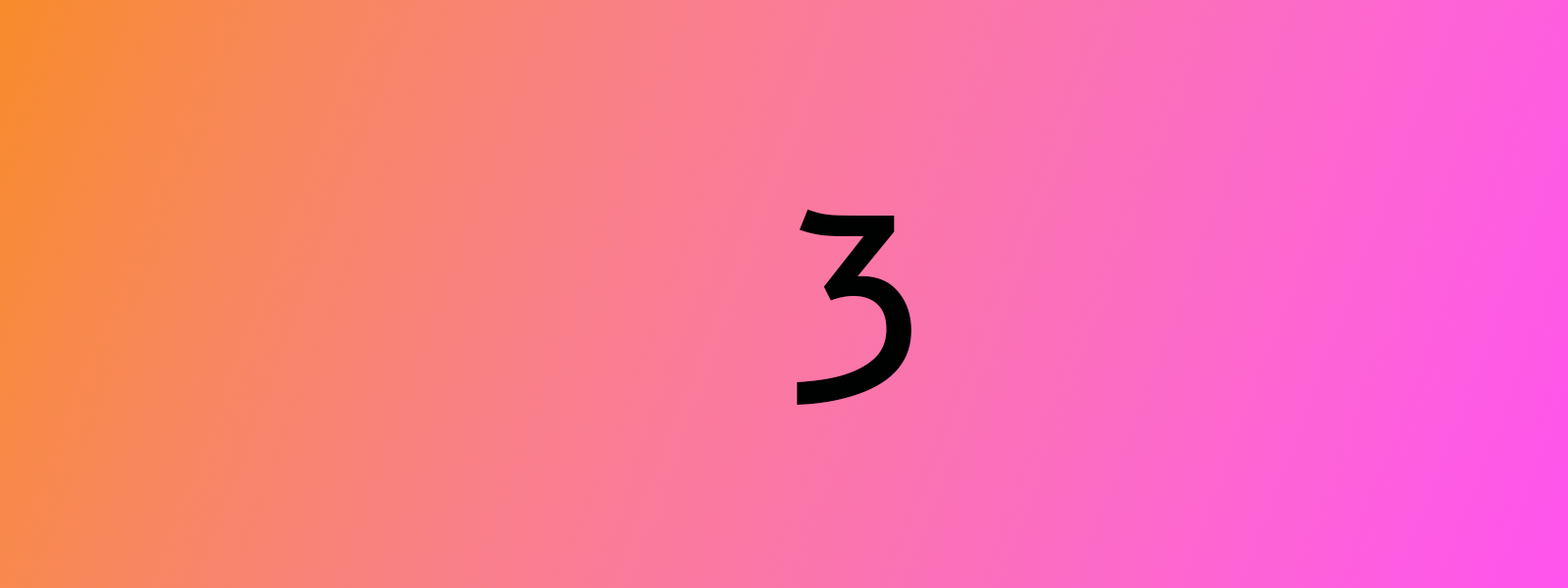
<style>
.page{position:relative;width:1568px;height:588px}
.page>*{position:absolute;margin:0}
.t1{font:294px "Alef-Regular";color:#000101}
</style>
<div class="page">
<p class="t1" style="left:797px;top:209px;width:114px;height:196px">3</p>
</div>
